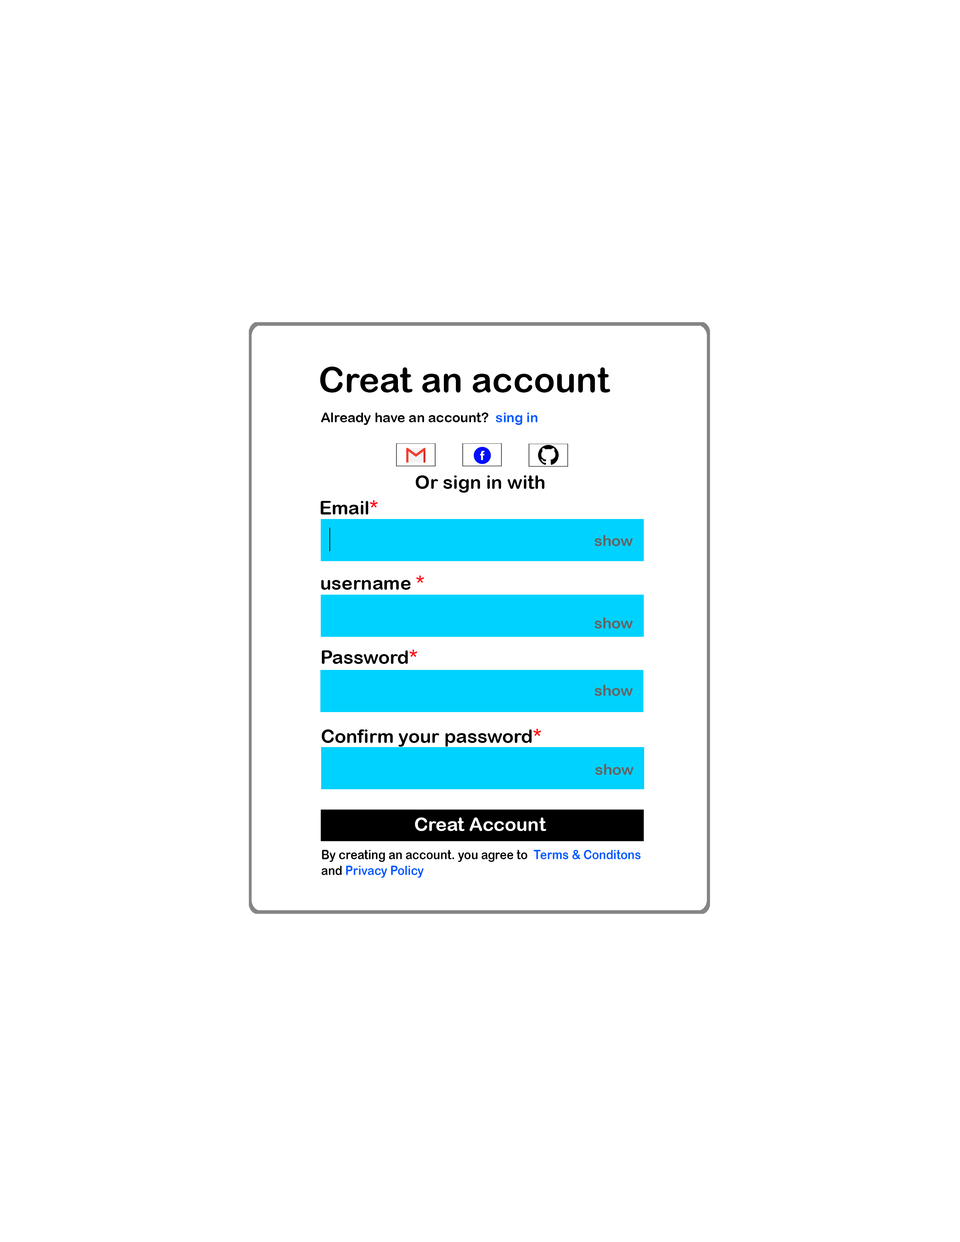
<style>
.page{position:relative;width:960px;height:1242px;background:#ffffff}
.page>*{position:absolute;margin:0}
.t1{font:35px "ArialRoundedMTBold";color:#000000}
.t2{font:13.4px "ArialRoundedMTBold";color:#000000}
.t3{font:13.4px "ArialRoundedMTBold";color:#005aff}
.t4{font:18.8px "ArialRoundedMTBold";color:#000000}
.t5{font:18.8px "ArialRoundedMTBold";color:#010101}
.t6{font:18.8px "ArialRoundedMTBold";color:#fe0012}
.t7{font:15.3px "ArialRoundedMTBold";color:#636363}
.t8{font:18.8px "ArialRoundedMTBold";color:#ff0000}
.t9{font:18.8px "ArialRoundedMTBold";color:#ffffff}
.t10{font:13.1px "ArialRoundedMTBold";color:#000000;scale:0.89 1}
.t11{font:13.1px "ArialRoundedMTBold";color:#005aff;scale:0.89 1}
</style>
<div class="page">
<p class="t1" style="left:320px;top:367px;width:290px;height:26px">Creat an account</p>
<p class="t2" style="left:321px;top:413px;width:217px;height:12px">Already have an account?  <span class="t3">sing in</span></p>
<p class="t4" style="left:416px;top:475px;width:128px;height:18px">Or sign in with</p>
<p class="t5" style="left:320px;top:500px;width:58px;height:15px">Email<span class="t6">*</span></p>
<p class="t7" style="left:594px;top:535px;width:39px;height:11px">show</p>
<p class="t5" style="left:321px;top:576px;width:103px;height:14px">username <span class="t6">*</span></p>
<p class="t7" style="left:594px;top:617px;width:39px;height:12px">show</p>
<p class="t5" style="left:321px;top:650px;width:96px;height:14px">Password<span class="t8">*</span></p>
<p class="t7" style="left:594px;top:685px;width:39px;height:11px">show</p>
<p class="t5" style="left:321px;top:729px;width:220px;height:18px">Confirm your password<span class="t8">*</span></p>
<p class="t7" style="left:595px;top:764px;width:39px;height:11px">show</p>
<p class="t9" style="left:415px;top:818px;width:131px;height:13px">Creat Account</p>
<p class="t10" style="left:321px;top:850px;width:320px;height:28px">By creating an account. you agree to  <span class="t11">Terms &amp; Conditons<br></span>and <span class="t11">Privacy Policy</span></p>
</div>
